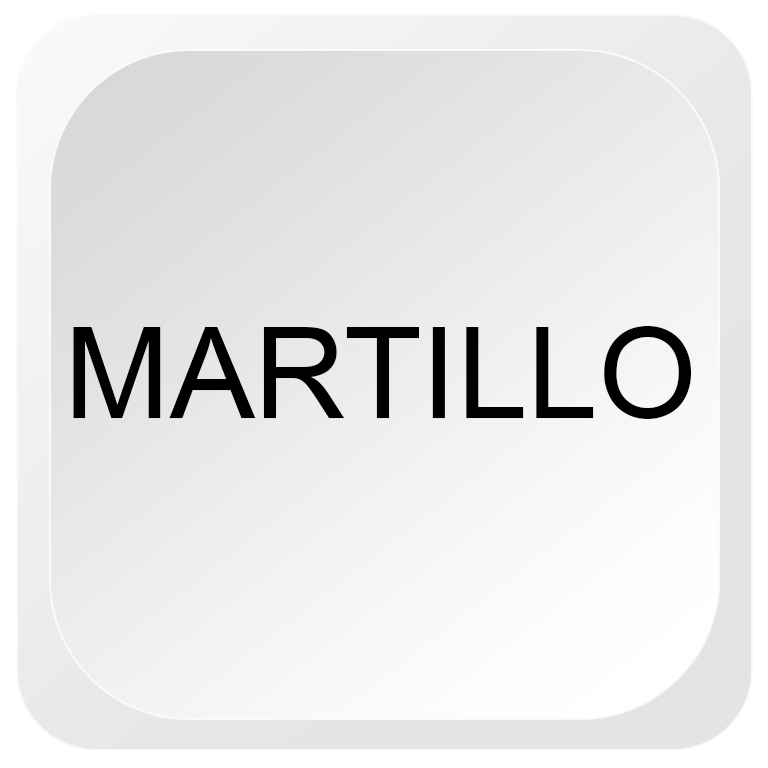
<style>
.page{position:relative;width:768px;height:768px}
.page>*{position:absolute;margin:0}
.t1{font:127px "ArialMT";color:#000000}
</style>
<div class="page">
<p class="t1" style="left:73px;top:326px;width:619px;height:93px">MARTILLO</p>
</div>
